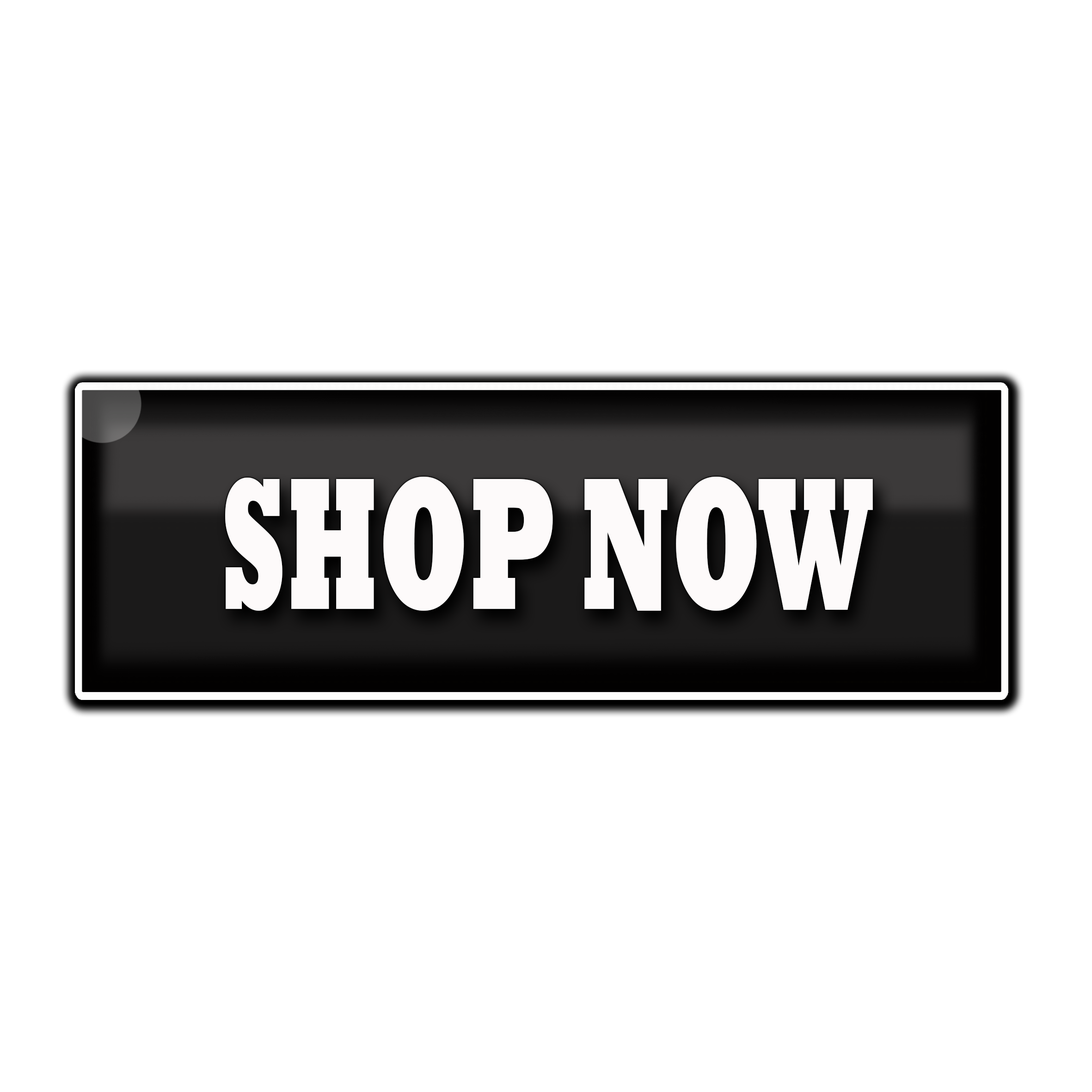
<style>
.page{position:relative;width:1092px;height:1092px;background:#ffffff}
.page>*{position:absolute;margin:0}
.t1{font:190.8px "Rockwell-ExtraBold";color:#fdfafa;scale:0.55 1}
</style>
<div class="page">
<p class="t1" style="left:225px;top:477px;width:648px;height:134px">SHOP NOW</p>
</div>
